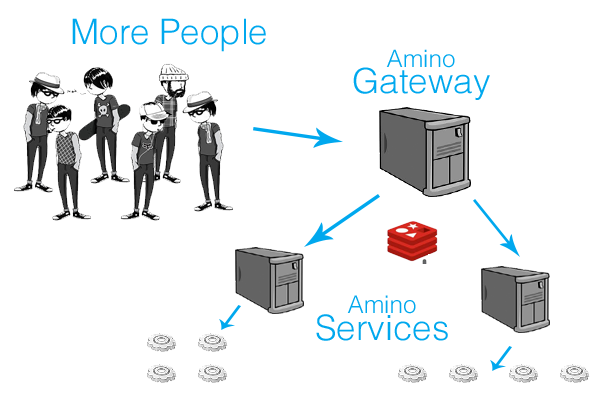
<style>
.page{position:relative;width:600px;height:400px;background:#ffffff}
.page>*{position:absolute;margin:0}
.t1{font:35px "Helvetica-Light";color:#00a8ee}
.t2{font:34.6px/26.7px "Helvetica-Light";color:#00a8ee}
.t3{font:24px/26.7px "Helvetica-Light";color:#00a8ee}
.t4{font:34.8px/26.9px "Helvetica-Light";color:#00a8ee}
.t5{font:24.2px/26.9px "Helvetica-Light";color:#00a8ee}
</style>
<div class="page">
<p class="t1" style="left:72px;top:18px;width:194px;height:34px">More People</p>
<p class="t2" style="left:353px;top:49px;width:137px;height:51px;text-align:center"><span class="t3">Amino<br></span>Gateway</p>
<p class="t4" style="left:316px;top:295px;width:132px;height:46px;text-align:center"><span class="t5">Amino<br></span>Services</p>
</div>
